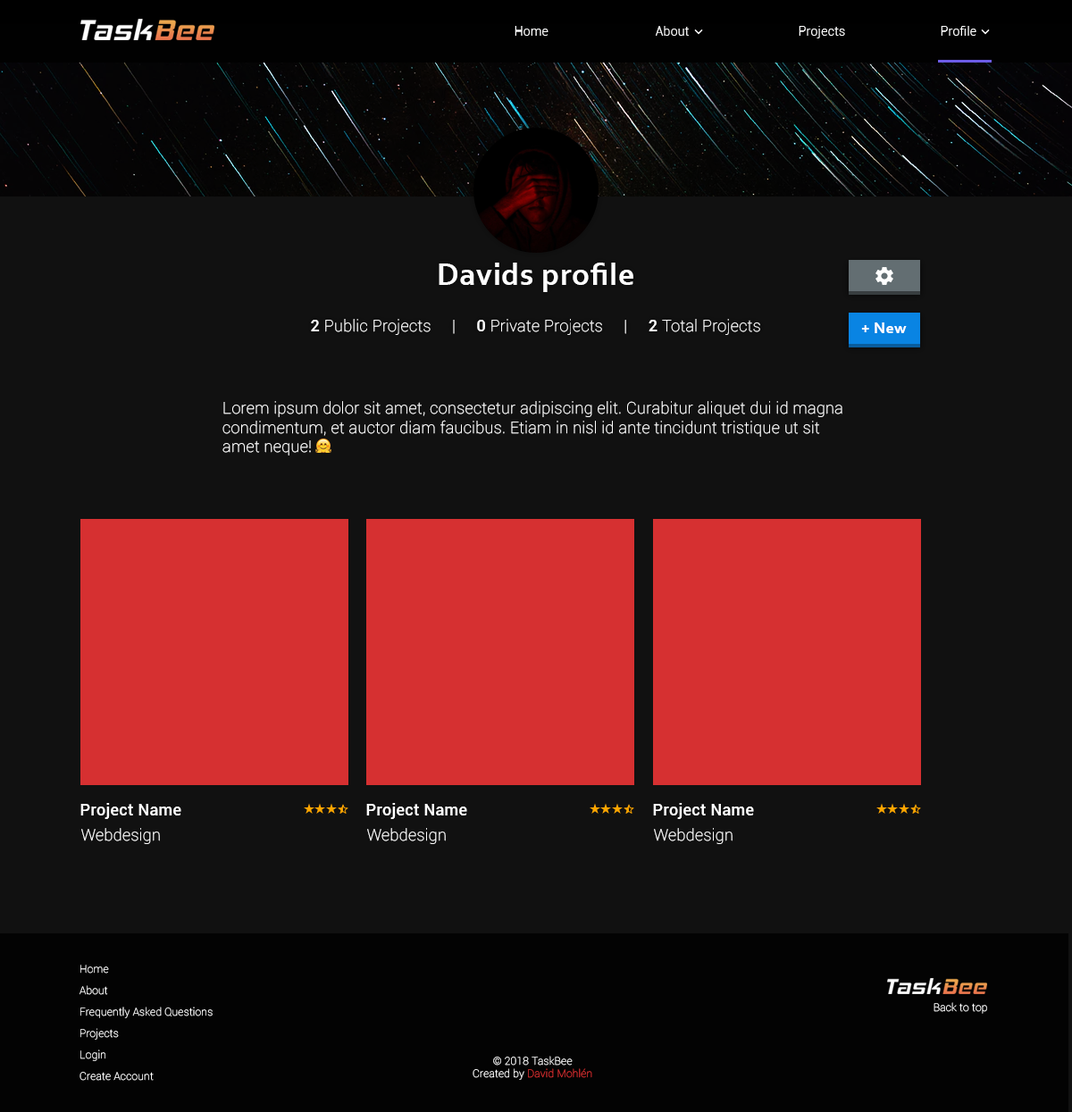
<style>
.page{position:relative;width:1072px;height:1112px;background:#111111}
.page>*{position:absolute;margin:0}
.t1{font:12.5px "Roboto-Light";letter-spacing:0.02em;color:#ffffff}
.t2{font:32.2px "Corbel-Bold";letter-spacing:0.02em;color:#ffffff}
.t3{font:16.1px "Roboto-Thin";letter-spacing:0.02em;color:#ffffff}
.t4{font:16.1px "Roboto-Medium";letter-spacing:0.02em;color:#ffffff}
.t5{font:16.1px "Corbel-Bold";letter-spacing:0.02em;color:#ffffff}
.t6{font:10.7px/21.4px "Roboto-Thin";letter-spacing:0.02em;color:#ffffff}
.t7{font:10.7px "Roboto-Thin";letter-spacing:0.02em;color:#ffffff}
.t8{font:10.7px "Roboto-Thin";letter-spacing:0.02em;color:#d63031}
</style>
<div class="page">
<p class="t1" style="left:515px;top:26px;width:34px;height:10px">Home</p>
<p class="t1" style="left:656px;top:26px;width:33px;height:10px">About</p>
<p class="t1" style="left:799px;top:26px;width:46px;height:12px">Projects</p>
<p class="t1" style="left:941px;top:26px;width:35px;height:10px">Profile</p>
<p class="t2" style="left:439px;top:263px;width:194px;height:29px">Davids profile</p>
<p class="t3" style="left:311px;top:319px;width:449px;height:16px"><span class="t4">2</span> Public Projects     |     <span class="t4">0</span> Private Projects     |     <span class="t4">2</span> Total Projects</p>
<p class="t5" style="left:861px;top:323px;width:46px;height:10px">+ New</p>
<p class="t3" style="left:222px;top:401px;width:620px;height:55px">Lorem ipsum dolor sit amet, consectetur adipiscing elit. Curabitur aliquet dui id magna<br>condimentum, et auctor diam faucibus. Etiam in nisl id ante tincidunt tristique ut sit<br>amet neque!</p>
<p class="t4" style="left:80px;top:803px;width:101px;height:16px">Project Name</p>
<p class="t4" style="left:366px;top:803px;width:101px;height:16px">Project Name</p>
<p class="t4" style="left:653px;top:803px;width:101px;height:16px">Project Name</p>
<p class="t3" style="left:81px;top:828px;width:79px;height:16px">Webdesign</p>
<p class="t3" style="left:367px;top:828px;width:79px;height:16px">Webdesign</p>
<p class="t3" style="left:654px;top:828px;width:79px;height:16px">Webdesign</p>
<p class="t6" style="left:80px;top:965px;width:133px;height:116px">Home<br>About<br>Frequently Asked Questions<br>Projects<br>Login<br>Create Account</p>
<p class="t7" style="left:934px;top:1002px;width:53px;height:12px">Back to top</p>
<p class="t7" style="left:473px;top:1056px;width:119px;height:24px;text-align:center">© 2018 TaskBee<br>Created by <span class="t8">David Mohlén</span></p>
</div>
